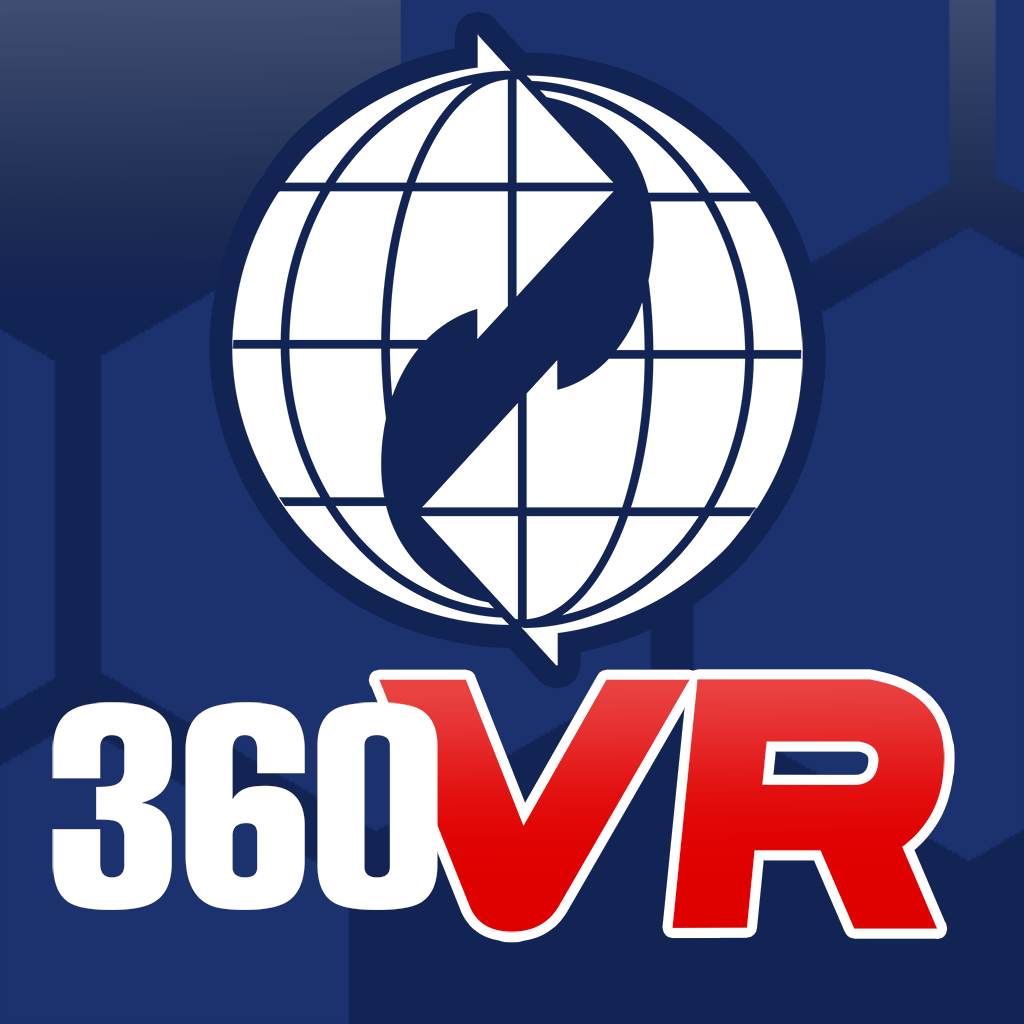
<style>
.page{position:relative;width:1024px;height:1024px;background:#1b326f}
.page>*{position:absolute;margin:0}
.t1{font:363.4px "!PEPSI!"}
.t2{font:263.4px "ARubricaCnBold";color:#ffffff}
</style>
<div class="page">
<p class="t1" style="left:378px;top:679px;width:567px;height:254px">VR</p>
<p class="t2" style="left:52px;top:702px;width:386px;height:208px">360</p>
</div>
